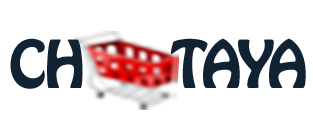
<style>
.page{position:relative;width:313px;height:135px;background:#ffffff}
.page>*{position:absolute;margin:0}
.t1{font:58.3px "HoboStd";letter-spacing:-0.04em;color:#112233}
</style>
<div class="page">
<p class="t1" style="left:10px;top:38px;width:296px;height:51px">CH      TAYA</p>
</div>
